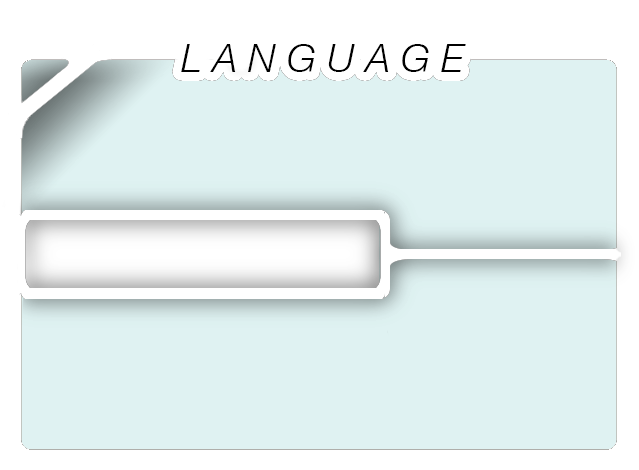
<style>
.page{position:relative;width:639px;height:470px;background:#dff2f2}
.page>*{position:absolute;margin:0}
.t1{font:39.3px "HelveticaNeue-LightItalic";color:#000000;text-transform:uppercase}
</style>
<div class="page">
<p class="t1" style="left:181px;top:44px;width:285px;height:28px">L a n g u a g e</p>
</div>
